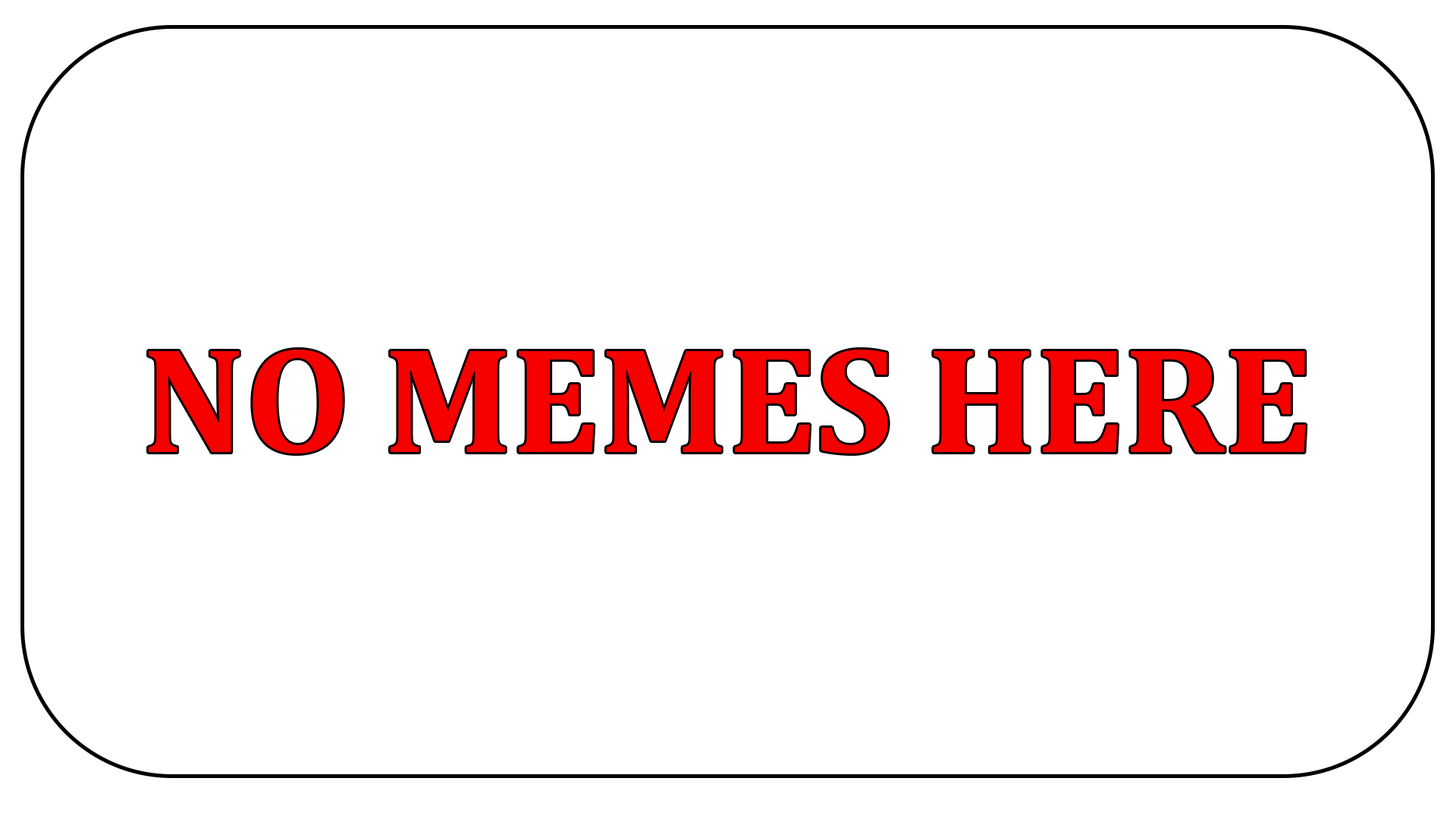
<style>
.page{position:relative;width:1456px;height:819px;background:#ffffff}
.page>*{position:absolute;margin:0}
.t1{font:151.7px "Cambria-Bold";color:#f60000}
</style>
<div class="page">
<p class="t1" style="left:149px;top:350px;width:1157px;height:103px">NO MEMES HERE</p>
</div>
